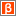
<style>
.page{position:relative;width:16px;height:16px;background:#ff4500}
.page>*{position:absolute;margin:0}
.t1{font:12px "ArialMT";color:#ffffff;font-weight:bold}
</style>
<div class="page">
<p class="t1" style="left:5px;top:3px;width:7px;height:12px">β</p>
</div>
